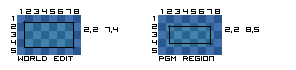
<style>
.page{position:relative;width:296px;height:70px;background:#ffffff}
.page>*{position:absolute;margin:0}
.t1{font:13px "VisitorTT2BRK";color:#000000}
</style>
<div class="page">
<p class="t1" style="left:12px;top:16px;width:2px;height:5px">1</p>
<p class="t1" style="left:20px;top:9px;width:2px;height:5px">1</p>
<p class="t1" style="left:26px;top:9px;width:5px;height:5px">2</p>
<p class="t1" style="left:34px;top:9px;width:5px;height:5px">3</p>
<p class="t1" style="left:42px;top:9px;width:5px;height:5px">4</p>
<p class="t1" style="left:50px;top:9px;width:5px;height:5px">5</p>
<p class="t1" style="left:58px;top:9px;width:5px;height:5px">6</p>
<p class="t1" style="left:66px;top:9px;width:5px;height:5px">7</p>
<p class="t1" style="left:74px;top:9px;width:5px;height:5px">8</p>
<p class="t1" style="left:153px;top:16px;width:2px;height:5px">1</p>
<p class="t1" style="left:161px;top:9px;width:2px;height:5px">1</p>
<p class="t1" style="left:167px;top:9px;width:5px;height:5px">2</p>
<p class="t1" style="left:175px;top:9px;width:5px;height:5px">3</p>
<p class="t1" style="left:183px;top:9px;width:5px;height:5px">4</p>
<p class="t1" style="left:191px;top:9px;width:5px;height:5px">5</p>
<p class="t1" style="left:199px;top:9px;width:5px;height:5px">6</p>
<p class="t1" style="left:207px;top:9px;width:5px;height:5px">7</p>
<p class="t1" style="left:215px;top:9px;width:5px;height:5px">8</p>
<p class="t1" style="left:11px;top:24px;width:5px;height:5px">2</p>
<p class="t1" style="left:84px;top:27px;width:34px;height:6px">2,2 7,4</p>
<p class="t1" style="left:152px;top:24px;width:5px;height:5px">2</p>
<p class="t1" style="left:225px;top:27px;width:34px;height:6px">2,2 8,5</p>
<p class="t1" style="left:11px;top:32px;width:5px;height:5px">3</p>
<p class="t1" style="left:11px;top:40px;width:5px;height:5px">4</p>
<p class="t1" style="left:152px;top:32px;width:5px;height:5px">3</p>
<p class="t1" style="left:152px;top:40px;width:5px;height:5px">4</p>
<p class="t1" style="left:11px;top:48px;width:5px;height:5px">5</p>
<p class="t1" style="left:152px;top:48px;width:5px;height:5px">5</p>
<p class="t1" style="left:18px;top:56px;width:55px;height:5px">World Edit</p>
<p class="t1" style="left:159px;top:56px;width:55px;height:5px">PGM Region</p>
</div>
